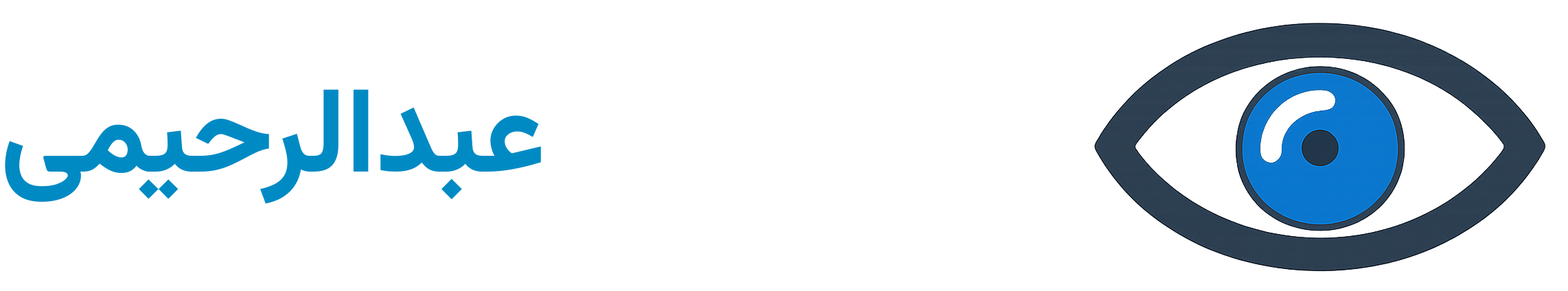
<style>
.page{position:relative;width:1568px;height:291px;background:#ffffff}
.page>*{position:absolute;margin:0}
.t1{font:120.1px "Vazirmatn-Bold";letter-spacing:-0.01em;color:#008ac4}
.t2{font:120.1px "Vazirmatn-Bold";letter-spacing:-0.01em;color:#ffffff}
</style>
<div class="page">
<p class="t1" style="left:5px;top:88px;width:1032px;height:116px"><span class="t2">دکتر وحید </span>عبدالرحیمی</p>
</div>
